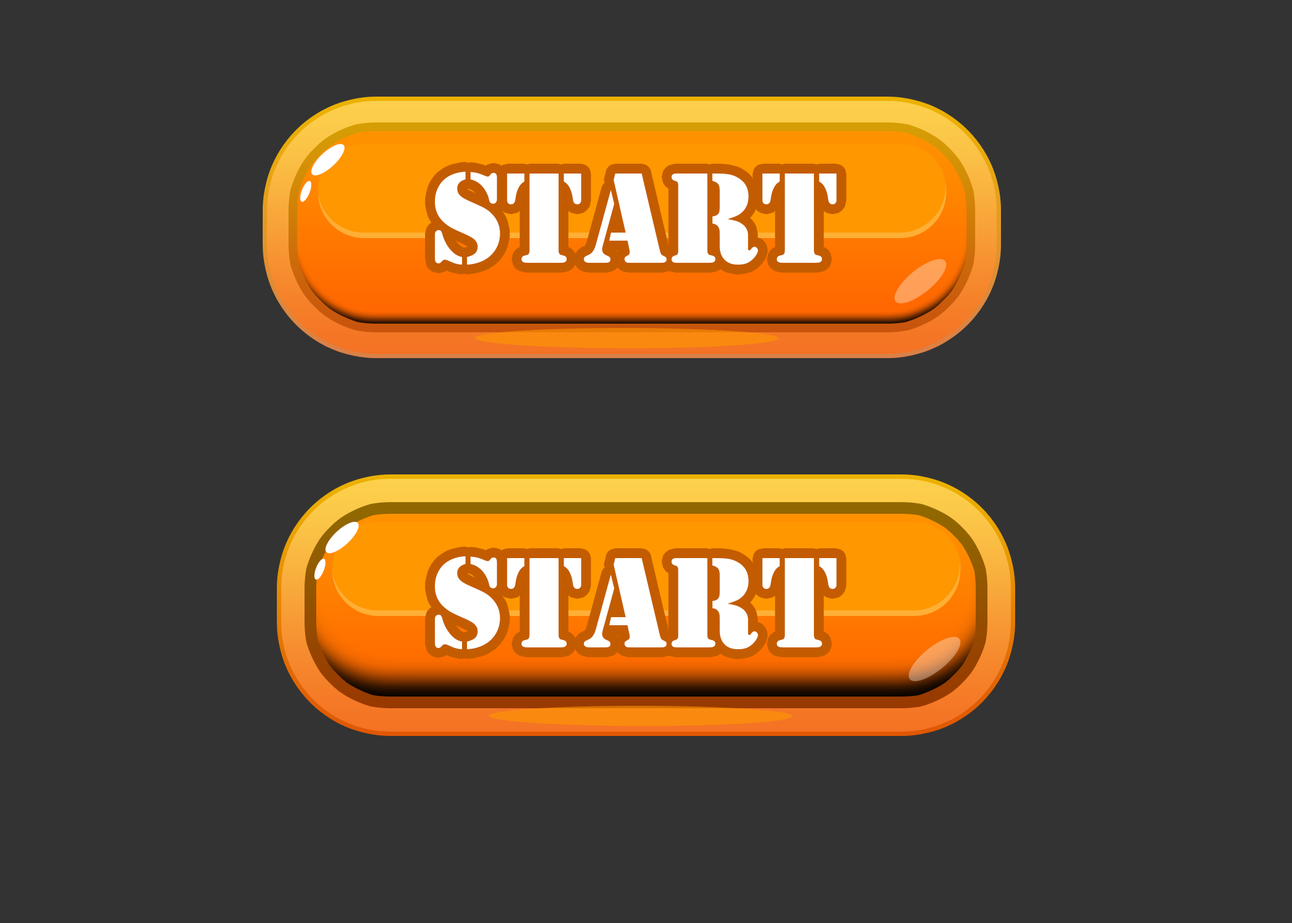
<style>
.page{position:relative;width:1292px;height:923px;background:#333333}
.page>*{position:absolute;margin:0}
.t1{font:133.3px "Stencil";color:#ffffff}
</style>
<div class="page">
<p class="t1" style="left:434px;top:172px;width:403px;height:93px">Start</p>
<p class="t1" style="left:434px;top:556px;width:403px;height:93px">Start</p>
</div>
